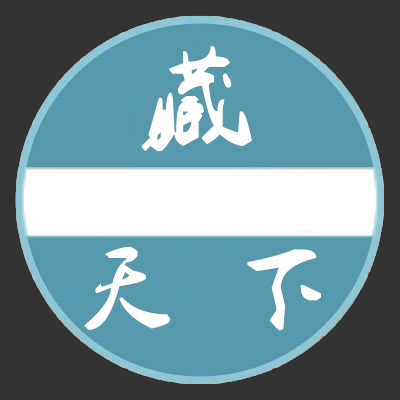
<style>
.page{position:relative;width:400px;height:400px;background:#5699ac}
.page>*{position:absolute;margin:0}
.t1{font:110px "2.0-";color:#ffffff}
.t2{font:90px "2.0-";color:#ffffff}
</style>
<div class="page">
<p class="t1" style="left:141px;top:46px;width:111px;height:106px">藏</p>
<p class="t2" style="left:84px;top:246px;width:86px;height:84px">天</p>
<p class="t2" style="left:247px;top:249px;width:74px;height:82px">下</p>
</div>
